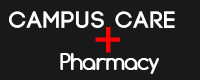
<style>
.page{position:relative;width:200px;height:80px;background:#191919}
.page>*{position:absolute;margin:0}
.t1{font:24px "Code-Bold";letter-spacing:0.06em;color:#fffdfd;text-transform:uppercase}
.t2{font:24px "Comfortaa-Bold";letter-spacing:-0.04em;color:#fffdfd}
</style>
<div class="page">
<p class="t1" style="left:9px;top:11px;width:166px;height:17px">CAMPUS CARE</p>
<p class="t2" style="left:60px;top:53px;width:99px;height:21px">Pharmacy</p>
</div>
